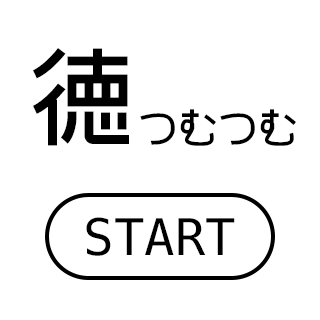
<style>
.page{position:relative;width:320px;height:320px;background:#ffffff}
.page>*{position:absolute;margin:0}
.t1{font:100px "GD-HighwayGothicJA-OTF";color:#000000}
.t2{font:40px "GD-HighwayGothicJA-OTF";color:#000000}
.t3{font:50.4px "Menlo-Regular";color:#000000}
</style>
<div class="page">
<p class="t1" style="left:33px;top:48px;width:96px;height:98px">徳</p>
<p class="t2" style="left:140px;top:109px;width:156px;height:37px">つむつむ</p>
<p class="t3" style="left:86px;top:217px;width:149px;height:39px">START</p>
</div>
